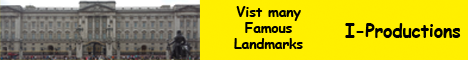
<style>
.page{position:relative;width:468px;height:60px;background:#ffef00}
.page>*{position:absolute;margin:0}
.t1{font:13.6px "ComicSansMS-Bold";color:#000000}
.t2{font:17.5px "ComicSansMS-Bold";color:#000000}
</style>
<div class="page">
<p class="t1" style="left:234px;top:6px;width:69px;height:43px;text-align:center">Vist many<br>Famous <br>Landmarks</p>
<p class="t2" style="left:345px;top:23px;width:116px;height:15px">I-Productions</p>
</div>
